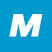
<style>
.page{position:relative;width:52px;height:52px;background:#0099cc}
.page>*{position:absolute;margin:0}
.t1{font:31.3px "AvenirNext-Bold";color:#fffffe;text-transform:uppercase;font-weight:bold;font-style:italic;scale:1.08 1}
</style>
<div class="page">
<p class="t1" style="left:9px;top:14px;width:34px;height:23px">M</p>
</div>
